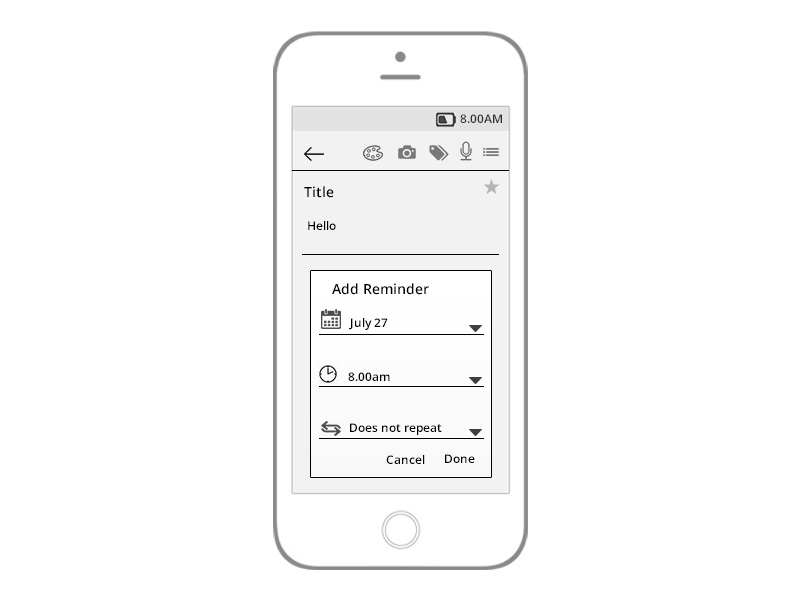
<style>
.page{position:relative;width:800px;height:600px;background:#ffffff}
.page>*{position:absolute;margin:0}
.t1{font:12px "OpenSans-Semibold";color:#2e2d2d}
.t2{font:14px "OpenSans-Semibold";color:#000000}
.t3{font:12px "OpenSans-Semibold";color:#000000}
</style>
<div class="page">
<p class="t1" style="left:460px;top:114px;width:42px;height:9px">8.00AM</p>
<p class="t2" style="left:304px;top:186px;width:30px;height:12px">Title</p>
<p class="t3" style="left:308px;top:221px;width:28px;height:9px">Hello</p>
<p class="t2" style="left:332px;top:283px;width:97px;height:12px">Add Reminder</p>
<p class="t3" style="left:349px;top:318px;width:39px;height:12px">July 27</p>
<p class="t3" style="left:348px;top:372px;width:42px;height:9px">8.00am</p>
<p class="t3" style="left:350px;top:423px;width:92px;height:12px">Does not repeat</p>
<p class="t3" style="left:386px;top:455px;width:39px;height:9px">Cancel</p>
<p class="t3" style="left:445px;top:454px;width:30px;height:9px">Done</p>
</div>
